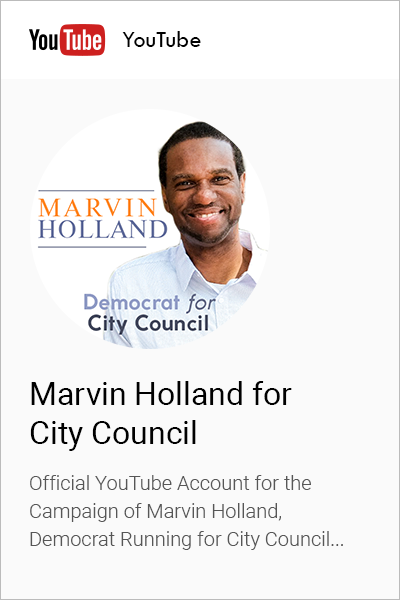
<style>
.page{position:relative;width:400px;height:600px;background:#fafafa}
.page>*{position:absolute;margin:0}
.t1{font:24px "TwCenMT-Regular";color:#000000}
.t2{font:32px "Roboto-Regular";color:#000000}
.t3{font:20px/28px "Roboto-Light";color:#565656}
</style>
<div class="page">
<p class="t1" style="left:122px;top:31px;width:79px;height:16px">YouTube</p>
<p class="t2" style="left:30px;top:381px;width:262px;height:70px">Marvin Holland for<br>City Council</p>
<p class="t3" style="left:30px;top:475px;width:313px;height:75px">Official YouTube Account for the Campaign of Marvin Holland, Democrat Running for City Council...</p>
</div>
